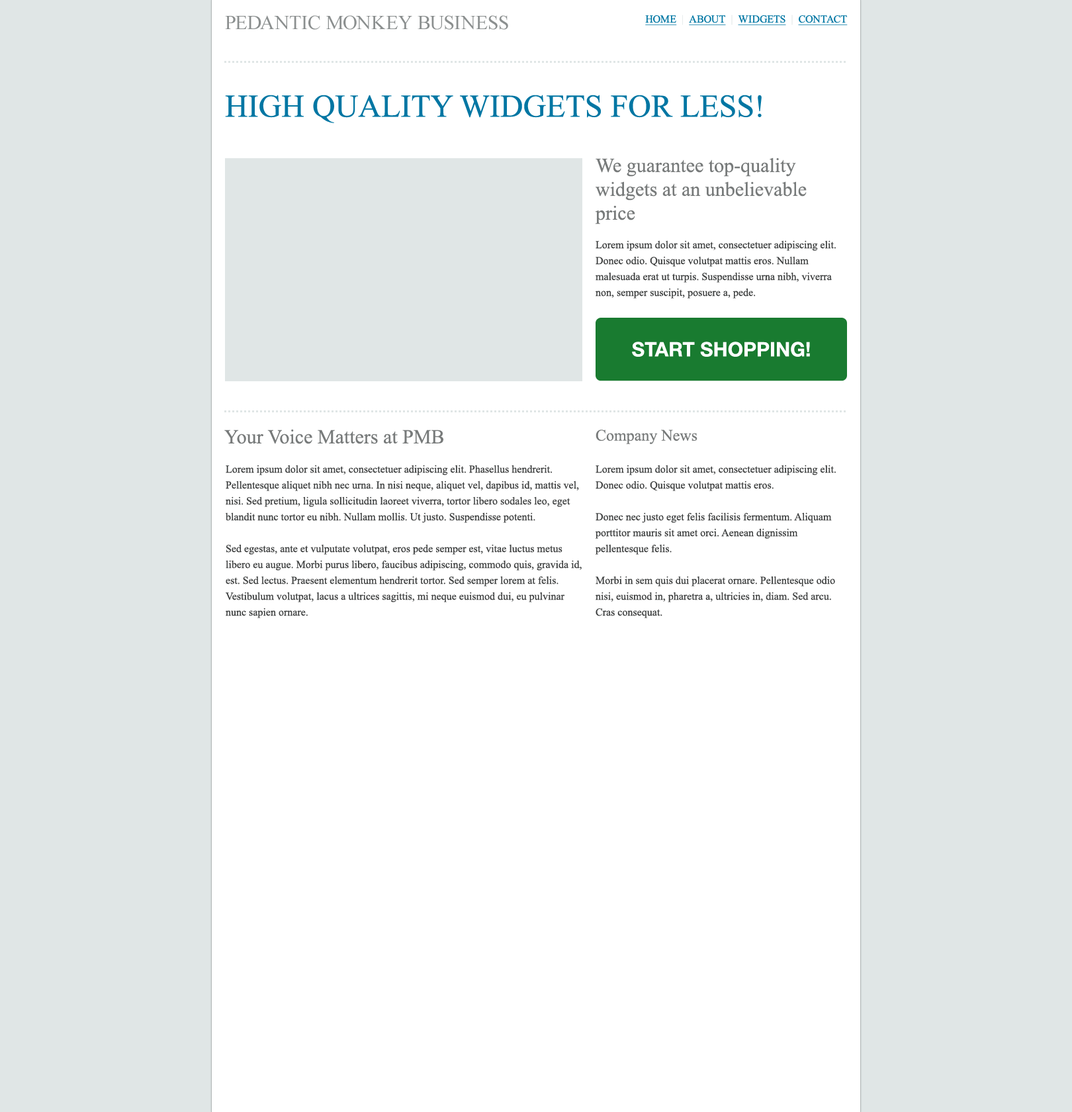
<style>
.page{position:relative;width:1072px;height:1112px;background:#ffffff}
.page>*{position:absolute;margin:0}
.t1{font:19.9px "TimesNewRomanPSMT";color:#8b8f8f}
.t2{font:10.6px "TimesNewRomanPSMT";color:#0076a3;text-decoration:underline}
.t3{font:10.6px "TimesNewRomanPSMT";color:#e0e6e6}
.t4{font:31.8px "TimesNewRomanPSMT";color:#0076a3}
.t5{font:19.9px "TimesNewRomanPSMT";color:#777a7a}
.t6{font:10.6px/15.9px "TimesNewRomanPSMT";color:#3b3d3d}
.t7{font:19.9px "HelveticaNeue-Bold";color:#ffffff}
.t8{font:15.9px "TimesNewRomanPSMT";color:#777a7a}
</style>
<div class="page">
<p class="t1" style="left:225px;top:15px;width:283px;height:15px">PEDANTIC MONKEY BUSINESS</p>
<p class="t2" style="left:645px;top:15px;width:203px;height:10px">HOME  <span class="t3">|  </span>ABOUT  <span class="t3">|  </span>WIDGETS  <span class="t3">|  </span>CONTACT</p>
<p class="t4" style="left:225px;top:95px;width:537px;height:28px">HIGH QUALITY WIDGETS FOR LESS!</p>
<p class="t5" style="left:595px;top:158px;width:212px;height:66px">We guarantee top-quality widgets at an unbelievable price</p>
<p class="t6" style="left:596px;top:240px;width:240px;height:59px">Lorem ipsum dolor sit amet, consectetuer adipiscing elit. Donec odio. Quisque volutpat mattis eros. Nullam malesuada erat ut turpis. Suspendisse urna nibh, viverra non, semper suscipit, posuere a, pede.</p>
<p class="t7" style="left:632px;top:342px;width:178px;height:15px">START SHOPPING!</p>
<p class="t5" style="left:224px;top:429px;width:219px;height:15px">Your Voice Matters at PMB</p>
<p class="t8" style="left:596px;top:430px;width:102px;height:14px">Company News</p>
<p class="t6" style="left:225px;top:465px;width:357px;height:153px">Lorem ipsum dolor sit amet, consectetuer adipiscing elit. Phasellus hendrerit. Pellentesque aliquet nibh nec urna. In nisi neque, aliquet vel, dapibus id, mattis vel, nisi. Sed pretium, ligula sollicitudin laoreet viverra, tortor libero sodales leo, eget blandit nunc tortor eu nibh. Nullam mollis. Ut justo. Suspendisse potenti.<br><br>Sed egestas, ante et vulputate volutpat, eros pede semper est, vitae luctus metus libero eu augue. Morbi purus libero, faucibus adipiscing, commodo quis, gravida id, est. Sed lectus. Praesent elementum hendrerit tortor. Sed semper lorem at felis. Vestibulum volutpat, lacus a ultrices sagittis, mi neque euismod dui, eu pulvinar nunc sapien ornare.</p>
<p class="t6" style="left:595px;top:465px;width:241px;height:153px">Lorem ipsum dolor sit amet, consectetuer adipiscing elit. Donec odio. Quisque volutpat mattis eros.<br><br>Donec nec justo eget felis facilisis fermentum. Aliquam porttitor mauris sit amet orci. Aenean dignissim pellentesque felis.<br><br>Morbi in sem quis dui placerat ornare. Pellentesque odio nisi, euismod in, pharetra a, ultricies in, diam. Sed arcu. Cras consequat.</p>
</div>
